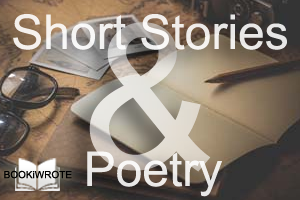
<style>
.page{position:relative;width:300px;height:200px}
.page>*{position:absolute;margin:0}
.t1{font:48px "ArialMT";color:#ffffff}
.t2{font:200px "ArialMT"}
</style>
<div class="page">
<p class="t1" style="left:13px;top:14px;width:274px;height:36px;opacity:0.88">Short Stories</p>
<p class="t2" style="left:89px;top:22px;width:122px;height:150px">&amp;</p>
<p class="t1" style="left:87px;top:151px;width:135px;height:46px;opacity:0.88">Poetry</p>
</div>
